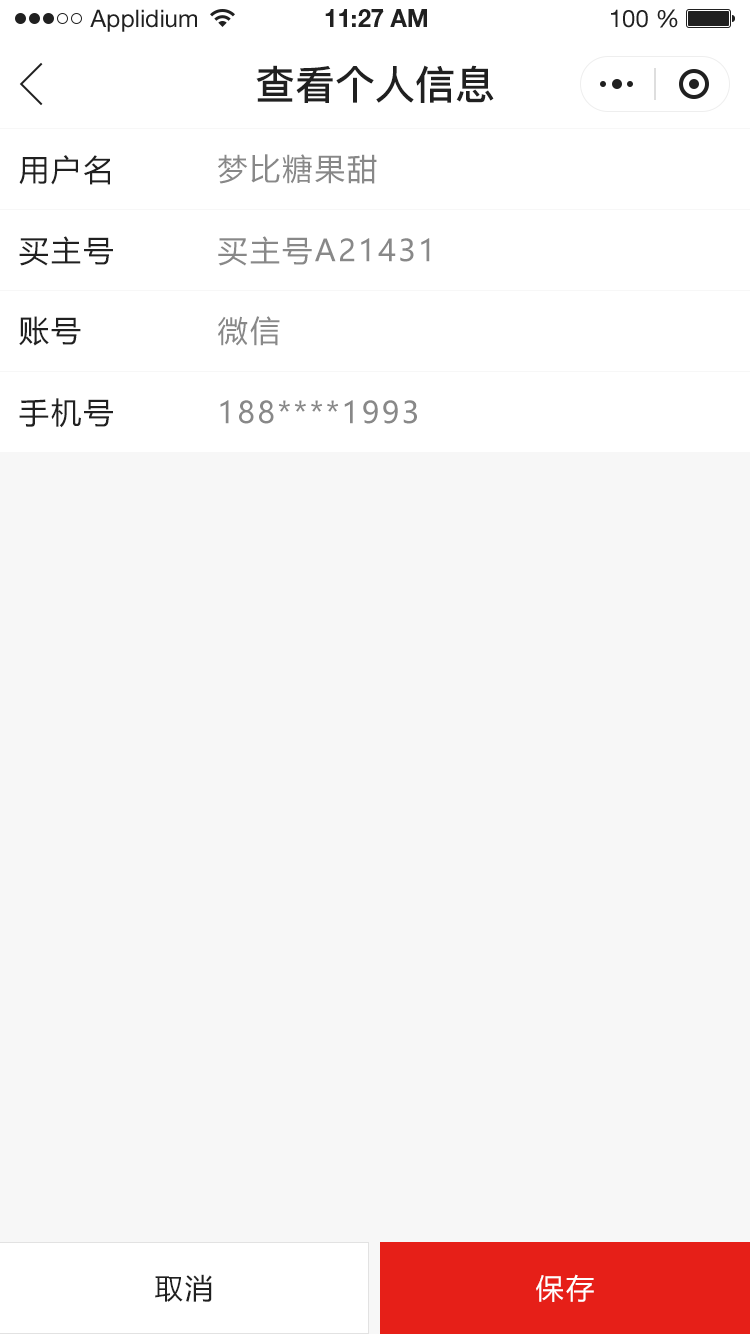
<style>
.page{position:relative;width:750px;height:1334px;background:#f7f7f7}
.page>*{position:absolute;margin:0}
.t1{font:24px "HelveticaNeueLTStd-Roman";color:#202020}
.t2{font:24px "HelveticaNeueLTStd-Bd";color:#202020}
.t3{font:40px "PingFang-SC-Bold";color:#202020;text-transform:uppercase}
.t4{font:30px "MicrosoftYaHei";letter-spacing:0.08em;color:#202020}
.t5{font:30px "MicrosoftYaHei";letter-spacing:0.08em;color:#888888}
.t6{font:28px "MicrosoftYaHei";letter-spacing:0.08em;color:#202020}
.t7{font:28px "MicrosoftYaHei";letter-spacing:0.08em;color:#ffffff}
</style>
<div class="page">
<p class="t1" style="left:90px;top:9px;width:107px;height:23px">Applidium</p>
<p class="t2" style="left:325px;top:9px;width:102px;height:18px">11:27 AM</p>
<p class="t1" style="left:611px;top:9px;width:67px;height:19px">100 %</p>
<p class="t3" style="left:256px;top:65px;width:238px;height:38px">查看个人信息</p>
<p class="t4" style="left:19px;top:155px;width:91px;height:30px">用户名</p>
<p class="t5" style="left:218px;top:154px;width:159px;height:30px">梦比糖果甜</p>
<p class="t4" style="left:19px;top:236px;width:94px;height:30px">买主号</p>
<p class="t5" style="left:218px;top:236px;width:212px;height:30px">买主号A21431</p>
<p class="t4" style="left:19px;top:316px;width:62px;height:30px">账号</p>
<p class="t5" style="left:218px;top:316px;width:62px;height:30px">微信</p>
<p class="t4" style="left:19px;top:398px;width:94px;height:30px">手机号</p>
<p class="t5" style="left:220px;top:400px;width:197px;height:24px">188****1993</p>
<p class="t6" style="left:155px;top:1274px;width:57px;height:28px">取消</p>
<p class="t7" style="left:536px;top:1274px;width:58px;height:28px">保存</p>
</div>
